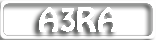
<style>
.page{position:relative;width:156px;height:40px;background:#ffffff}
.page>*{position:absolute;margin:0}
.t1{font:30px "HoboStd";color:#ffffff}
</style>
<div class="page">
<p class="t1" style="left:39px;top:7px;width:78px;height:25px">A3RA</p>
</div>
